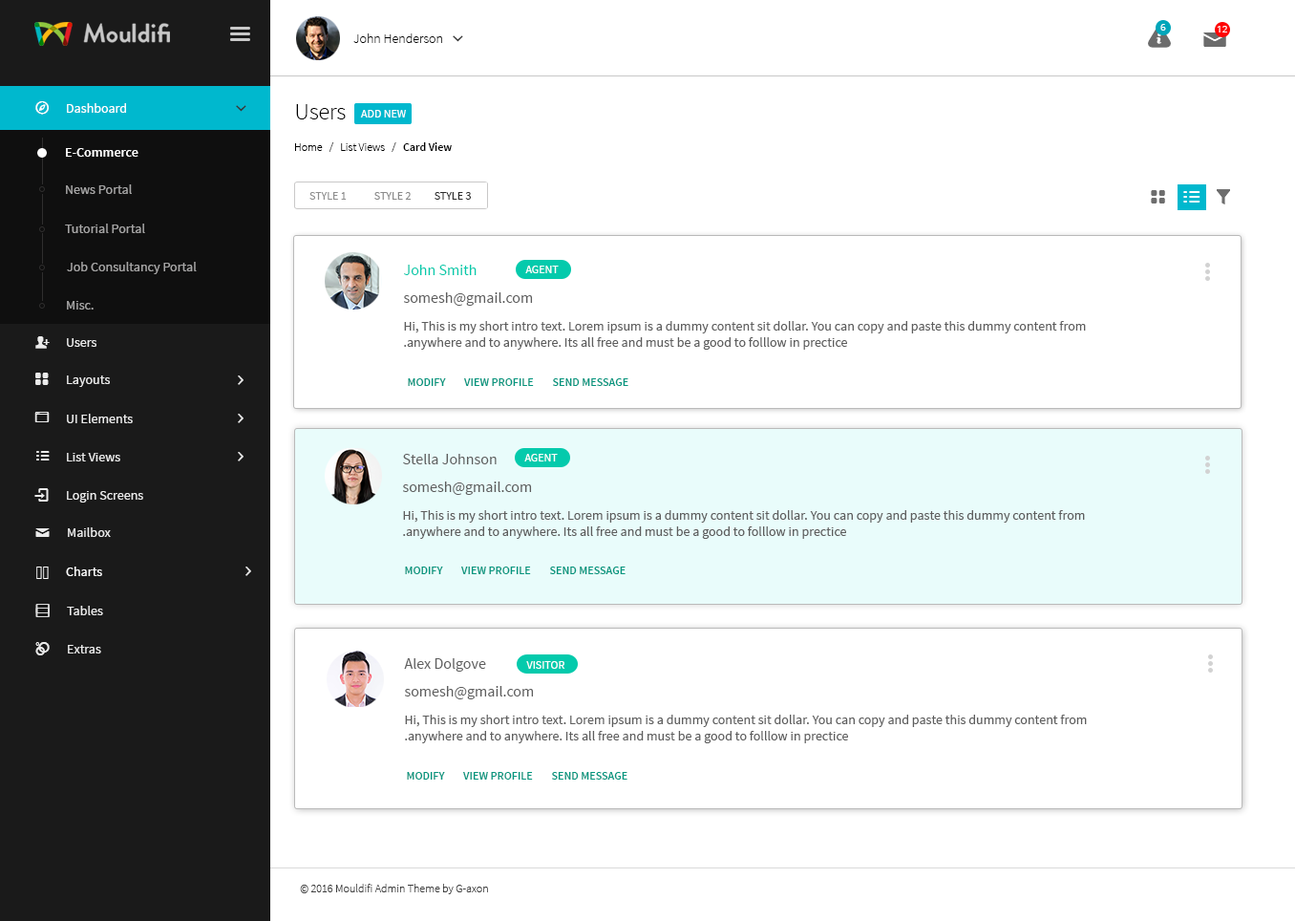
<style>
.page{position:relative;width:1295px;height:921px;background:#ffffff}
.page>*{position:absolute;margin:0}
.t1{font:9.6px "OpenSans";color:#ffffff}
.t2{font:13.4px "SourceSansPro-Light";color:#000000}
.t3{font:13.4px "SourceSansPro-Regular";color:#ffffff}
.t4{font:13.4px "SourceSansPro-Regular";color:#ffffff;font-variant:small-caps}
.t5{font:22.9px "SourceSansPro-Light";color:#000000}
.t6{font:11.5px "SourceSansPro-Regular";color:#ffffff;text-transform:uppercase}
.t7{font:13.4px "SourceSansPro-Semibold";color:#ffffff}
.t8{font:11.5px "SourceSansPro-Light";color:#000000}
.t9{font:11.5px "SourceSansPro-Semibold";color:#000000}
.t10{font:13.4px "SourceSansPro-Regular";color:#a6a5a5}
.t11{font:11.5px "SourceSansPro-Regular";color:#8f8f8f;text-transform:uppercase}
.t12{font:11.5px "SourceSansPro-Regular";color:#8a8a8a;text-transform:uppercase}
.t13{font:11.5px "SourceSansPro-Regular";color:#2b2b2b;text-transform:uppercase}
.t14{font:13px "SourceSansPro-Regular";color:#a6a5a5}
.t15{font:15.3px "SourceSansPro-Regular";color:#04caac}
.t16{font:15.3px "SourceSansPro-Regular";color:#5e5e5e}
.t17{font:13.4px "SourceSansPro-Regular";color:#5e5e5e}
.t18{font:13.4px "SourceSansPro-Regular";color:#ebebeb}
.t19{font:11.5px "SourceSansPro-Semibold";color:#01967f;text-transform:uppercase}
.t20{font:13px "SourceSansPro-Regular";color:#ebebeb}
.t21{font:11.5px "SourceSansPro-Light";color:#3e3e3e}
</style>
<div class="page">
<p class="t1" style="left:1160px;top:24px;width:6px;height:7px">6</p>
<p class="t1" style="left:1217px;top:26px;width:10px;height:6px">12</p>
<p class="t2" style="left:353px;top:33px;width:89px;height:10px">John Henderson</p>
<p class="t3" style="left:67px;top:103px;width:59px;height:10px"><span class="t4">D</span>ashboard</p>
<p class="t5" style="left:296px;top:104px;width:50px;height:15px">Users</p>
<p class="t6" style="left:360px;top:110px;width:46px;height:7px">add new</p>
<p class="t7" style="left:66px;top:148px;width:72px;height:9px">E-Commerce</p>
<p class="t8" style="left:295px;top:142px;width:157px;height:10px">Home   /   List Views   /  <span class="t9"> Card View</span></p>
<p class="t10" style="left:66px;top:184px;width:66px;height:10px">News Portal</p>
<p class="t11" style="left:309px;top:192px;width:162px;height:8px">Style 1            <span class="t12">Style 2          </span><span class="t13">Style 3</span></p>
<p class="t14" style="left:65px;top:223px;width:80px;height:10px">Tutorial Portal</p>
<p class="t14" style="left:67px;top:262px;width:130px;height:12px">Job Consultancy Portal</p>
<p class="t15" style="left:404px;top:265px;width:73px;height:10px">John Smith</p>
<p class="t6" style="left:525px;top:266px;width:34px;height:7px">Agent</p>
<p class="t16" style="left:404px;top:292px;width:129px;height:14px">somesh@gmail.com</p>
<p class="t14" style="left:67px;top:301px;width:27px;height:8px">Misc.</p>
<p class="t17" style="left:404px;top:321px;width:682px;height:29px;text-align:right">Hi, This is my short intro text. Lorem ipsum is a dummy content sit dollar. You can copy and paste this dummy content from anywhere and to anywhere. Its all free and must be a good to folllow in prectice.</p>
<p class="t18" style="left:67px;top:338px;width:29px;height:9px">Users</p>
<p class="t18" style="left:67px;top:375px;width:43px;height:12px">Layouts</p>
<p class="t19" style="left:408px;top:378px;width:220px;height:8px">modify        view profile        send message</p>
<p class="t18" style="left:67px;top:414px;width:66px;height:9px">UI Elements</p>
<p class="t18" style="left:67px;top:453px;width:53px;height:8px">List Views</p>
<p class="t16" style="left:403px;top:454px;width:94px;height:10px">Stella Johnson</p>
<p class="t6" style="left:524px;top:454px;width:34px;height:7px">Agent</p>
<p class="t16" style="left:403px;top:481px;width:129px;height:14px">somesh@gmail.com</p>
<p class="t18" style="left:67px;top:491px;width:76px;height:11px">Login Screens</p>
<p class="t17" style="left:403px;top:510px;width:682px;height:29px;text-align:right">Hi, This is my short intro text. Lorem ipsum is a dummy content sit dollar. You can copy and paste this dummy content from anywhere and to anywhere. Its all free and must be a good to folllow in prectice.</p>
<p class="t18" style="left:68px;top:527px;width:43px;height:10px">Mailbox</p>
<p class="t3" style="left:66px;top:566px;width:36px;height:10px">Charts</p>
<p class="t19" style="left:405px;top:566px;width:221px;height:8px">modify        view profile        send message</p>
<p class="t20" style="left:67px;top:606px;width:36px;height:9px">Tables</p>
<p class="t20" style="left:68px;top:645px;width:33px;height:8px">Extras</p>
<p class="t16" style="left:404px;top:658px;width:82px;height:13px">Alex Dolgove</p>
<p class="t6" style="left:526px;top:661px;width:39px;height:8px">visitor</p>
<p class="t16" style="left:405px;top:686px;width:129px;height:13px">somesh@gmail.com</p>
<p class="t17" style="left:405px;top:714px;width:682px;height:29px;text-align:right">Hi, This is my short intro text. Lorem ipsum is a dummy content sit dollar. You can copy and paste this dummy content from anywhere and to anywhere. Its all free and must be a good to folllow in prectice.</p>
<p class="t19" style="left:407px;top:772px;width:221px;height:7px">modify        view profile        send message</p>
<p class="t21" style="left:300px;top:883px;width:188px;height:11px">© 2016 Mouldifi Admin Theme by G-axon</p>
</div>
